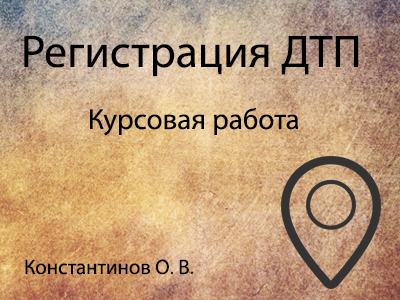
<style>
.page{position:relative;width:400px;height:300px}
.page>*{position:absolute;margin:0}
.t1{font:45.9px "MyriadPro-Regular";color:#000000}
.t2{font:29.2px "MyriadPro-Regular";color:#000000}
.t3{font:20.9px "MyriadPro-Regular";color:#000000}
</style>
<div class="page">
<p class="t1" style="left:24px;top:35px;width:335px;height:42px">Регистрация ДТП</p>
<p class="t2" style="left:90px;top:107px;width:208px;height:29px">Курсовая работа</p>
<p class="t3" style="left:25px;top:259px;width:169px;height:16px">Константинов О. В.</p>
</div>
